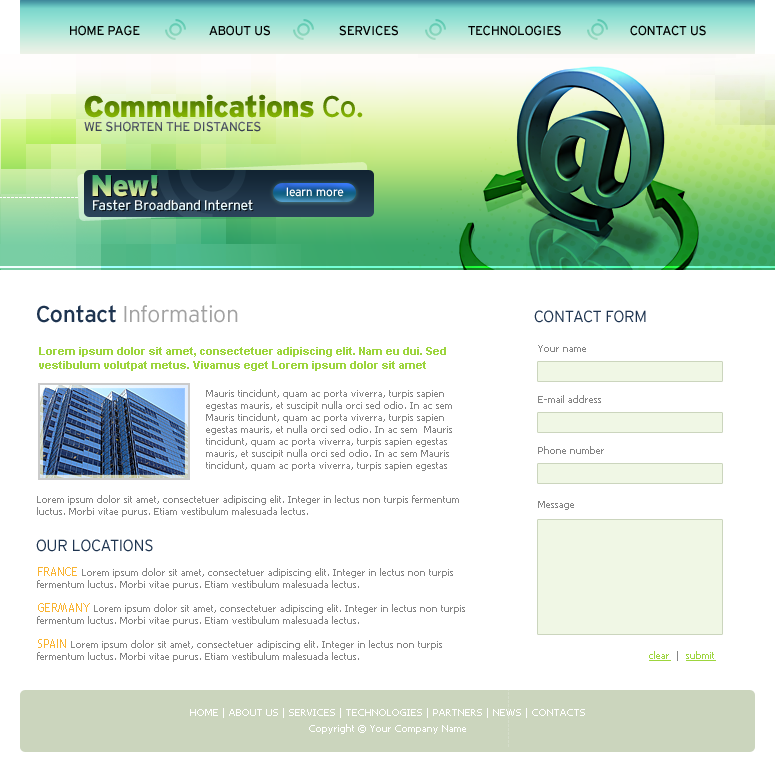
<style>
.page{position:relative;width:775px;height:770px;background:#ffffff}
.page>*{position:absolute;margin:0}
.t1{font:13px "Interstate-Regular";letter-spacing:-0.02em;color:#000000;text-transform:uppercase}
.t2{font:30px "Interstate-Black";letter-spacing:-0.02em}
.t3{font:30px "Interstate-Regular";letter-spacing:-0.02em}
.t4{font:13px "Interstate-Regular";letter-spacing:-0.02em;color:#515565;text-transform:uppercase}
.t5{font:12px "Interstate-Regular";letter-spacing:-0.02em;color:#ffffff}
.t6{font:14px "Interstate-Regular";letter-spacing:-0.02em;color:#e7f8fb}
.t7{font:23px "Interstate-Light";letter-spacing:-0.02em;color:#a1a1a1}
.t8{font:23px "Interstate-Regular";letter-spacing:-0.02em;color:#1e3450}
.t9{font:16px "Interstate-Light";letter-spacing:-0.02em;color:#1e3450;text-transform:uppercase}
.t10{font:11px/14px "Arial-BoldMT";color:#9dd53e}
.t11{font:10px "Tahoma";color:#858585}
.t12{font:10px/12px "Tahoma";color:#858585}
.t13{font:12px/10px "TrebuchetMS";color:#f9b331;text-transform:uppercase}
.t14{font:10px "Tahoma";color:#9dd53e;text-decoration:underline}
.t15{font:10px/16px "Tahoma";color:#ffffff}
</style>
<div class="page">
<p class="t1" style="left:70px;top:25px;width:70px;height:11px">HOME PAGE</p>
<p class="t1" style="left:209px;top:25px;width:61px;height:11px">ABOUT US</p>
<p class="t1" style="left:339px;top:25px;width:59px;height:11px">SERVICES</p>
<p class="t1" style="left:468px;top:25px;width:93px;height:11px">TECHNOLOGIES</p>
<p class="t1" style="left:630px;top:25px;width:76px;height:11px">CONTACT US</p>
<p class="t2" style="left:84px;top:94px;width:279px;height:24px">Communications<span class="t3"> Co.</span></p>
<p class="t4" style="left:84px;top:121px;width:177px;height:11px">WE SHORTEN THE DISTANCES</p>
<p class="t2" style="left:92px;top:175px;width:66px;height:22px">New!</p>
<p class="t5" style="left:286px;top:187px;width:58px;height:10px">learn more</p>
<p class="t6" style="left:93px;top:199px;width:160px;height:12px">Faster Broadband Internet</p>
<p class="t7" style="left:37px;top:305px;width:201px;height:18px"><span class="t8">Contact </span>Information</p>
<p class="t9" style="left:534px;top:310px;width:112px;height:13px">CONTACT FORM</p>
<p class="t10" style="left:39px;top:347px;width:407px;height:24px">Lorem ipsum dolor sit amet, consectetuer adipiscing elit. Nam eu dui. Sed vestibulum volutpat metus. Vivamus eget Lorem ipsum dolor sit amet</p>
<p class="t11" style="left:538px;top:345px;width:48px;height:7px">Your name</p>
<p class="t12" style="left:206px;top:389px;width:246px;height:82px">Mauris tincidunt, quam ac porta viverra, turpis sapien egestas mauris, et suscipit nulla orci sed odio. In ac sem Mauris tincidunt, quam ac porta viverra, turpis sapien egestas mauris, et nulla orci sed odio. In ac sem  Mauris tincidunt, quam ac porta viverra, turpis sapien egestas mauris, et suscipit nulla orci sed odio. In ac sem Mauris tincidunt, quam ac porta viverra, turpis sapien egestas</p>
<p class="t11" style="left:538px;top:395px;width:63px;height:8px">E-mail address</p>
<p class="t11" style="left:538px;top:446px;width:66px;height:8px">Phone number</p>
<p class="t12" style="left:37px;top:495px;width:422px;height:22px">Lorem ipsum dolor sit amet, consectetuer adipiscing elit. Integer in lectus non turpis fermentum luctus. Morbi vitae purus. Etiam vestibulum malesuada lectus.</p>
<p class="t11" style="left:538px;top:501px;width:36px;height:9px">Message</p>
<p class="t9" style="left:36px;top:539px;width:117px;height:13px">OUR LOCATIONS</p>
<p class="t12" style="left:37px;top:567px;width:428px;height:95px"><span class="t13">FRANCE </span>Lorem ipsum dolor sit amet, consectetuer adipiscing elit. Integer in lectus non turpis fermentum luctus. Morbi vitae purus. Etiam vestibulum malesuada lectus. <br><br><span class="t13">GERMANY </span>Lorem ipsum dolor sit amet, consectetuer adipiscing elit. Integer in lectus non turpis fermentum luctus. Morbi vitae purus. Etiam vestibulum malesuada lectus. <br><br><span class="t13">SPAIN </span>Lorem ipsum dolor sit amet, consectetuer adipiscing elit. Integer in lectus non turpis fermentum luctus. Morbi vitae purus. Etiam vestibulum malesuada lectus.</p>
<p class="t14" style="left:649px;top:651px;width:67px;height:10px">clear<span class="t11">  |  </span>submit</p>
<p class="t15" style="left:190px;top:708px;width:395px;height:26px;text-align:center">HOME | ABOUT US | SERVICES | TECHNOLOGIES | PARTNERS | NEWS | CONTACTS<br>Copyright © Your Company Name</p>
</div>
